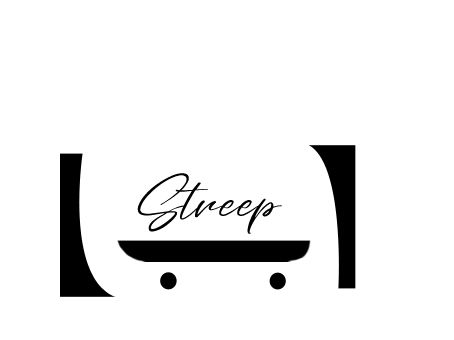
<style>
.page{position:relative;width:454px;height:340px;background:#ffffff}
.page>*{position:absolute;margin:0}
.t1{font:72px "Bresley-Regular";color:#000000}
</style>
<div class="page">
<p class="t1" style="left:137px;top:173px;width:145px;height:61px">Streep</p>
</div>
